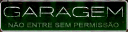
<style>
.page{position:relative;width:128px;height:32px}
.page>*{position:absolute;margin:0}
.t1{font:13.8px "FONTSPRINGDEMO-OrganettoSemiExpHairRegular";letter-spacing:0.02em;font-weight:bold}
.t2{font:5.9px "ArialMT";letter-spacing:0.02em;text-transform:uppercase;scale:1.27 1}
</style>
<div class="page">
<p class="t1" style="left:3px;top:6px;width:120px;height:11px">GARAGEm</p>
<p class="t2" style="left:8px;top:21px;width:111px;height:7px">NãO entre sem permissão</p>
</div>
